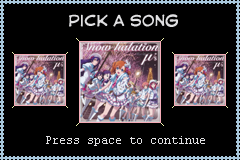
<style>
.page{position:relative;width:240px;height:160px;background:#000000}
.page>*{position:absolute;margin:0}
.t1{font:14px "CCAstroCity";color:#e0e0e2}
.t2{font:12px "CourierNewPSMT";color:#e0e0e2}
</style>
<div class="page">
<p class="t1" style="left:69px;top:14px;width:109px;height:13px">Pick a song</p>
<p class="t2" style="left:46px;top:136px;width:159px;height:10px">Press space to continue</p>
</div>
